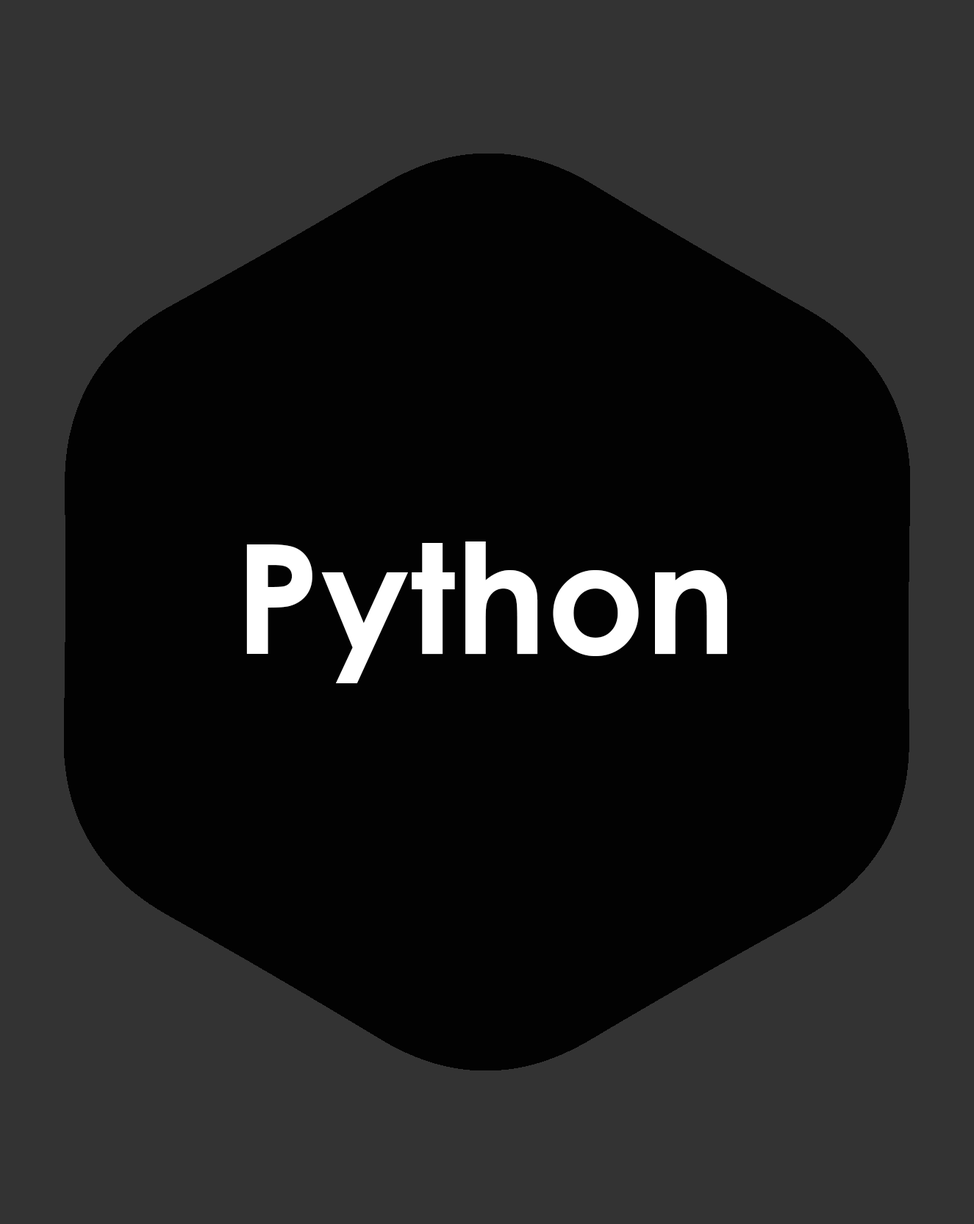
<style>
.page{position:relative;width:974px;height:1224px;background:#333333}
.page>*{position:absolute;margin:0}
.t1{font:153.1px "CenturyGothic-Bold";color:#ffffff}
</style>
<div class="page">
<p class="t1" style="left:246px;top:542px;width:482px;height:142px">Python</p>
</div>
